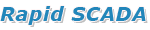
<style>
.page{position:relative;width:150px;height:30px;background:#ffffff}
.page>*{position:absolute;margin:0}
.t1{font:18.7px "Verdana-BoldItalic";letter-spacing:0.05em;color:#2286ba}
</style>
<div class="page">
<p class="t1" style="left:0px;top:6px;width:146px;height:19px">Rapid SCADA</p>
</div>
